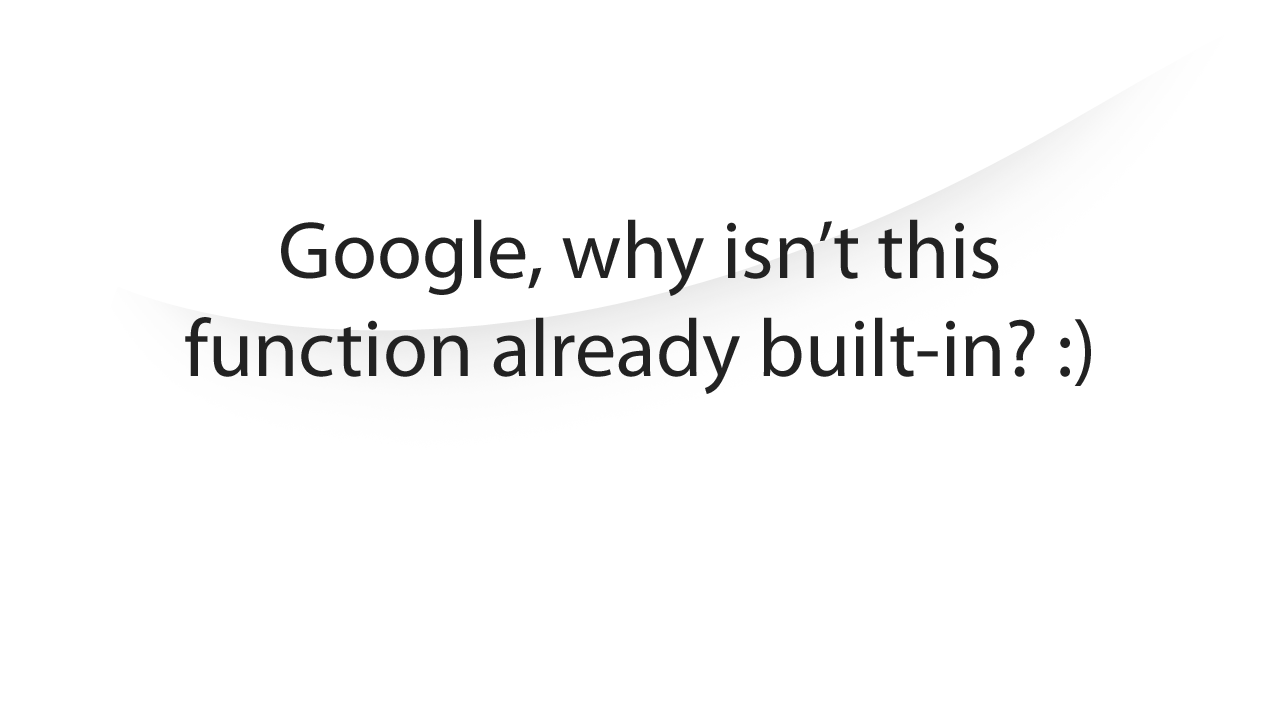
<style>
.page{position:relative;width:1280px;height:720px;background:#ffffff}
.page>*{position:absolute;margin:0}
.t1{font:82px "MyriadPro-Regular";color:#222222}
</style>
<div class="page">
<p class="t1" style="left:185px;top:219px;width:906px;height:175px;text-align:center">Google, why isn’t this<br>function already built-in? :)</p>
</div>
